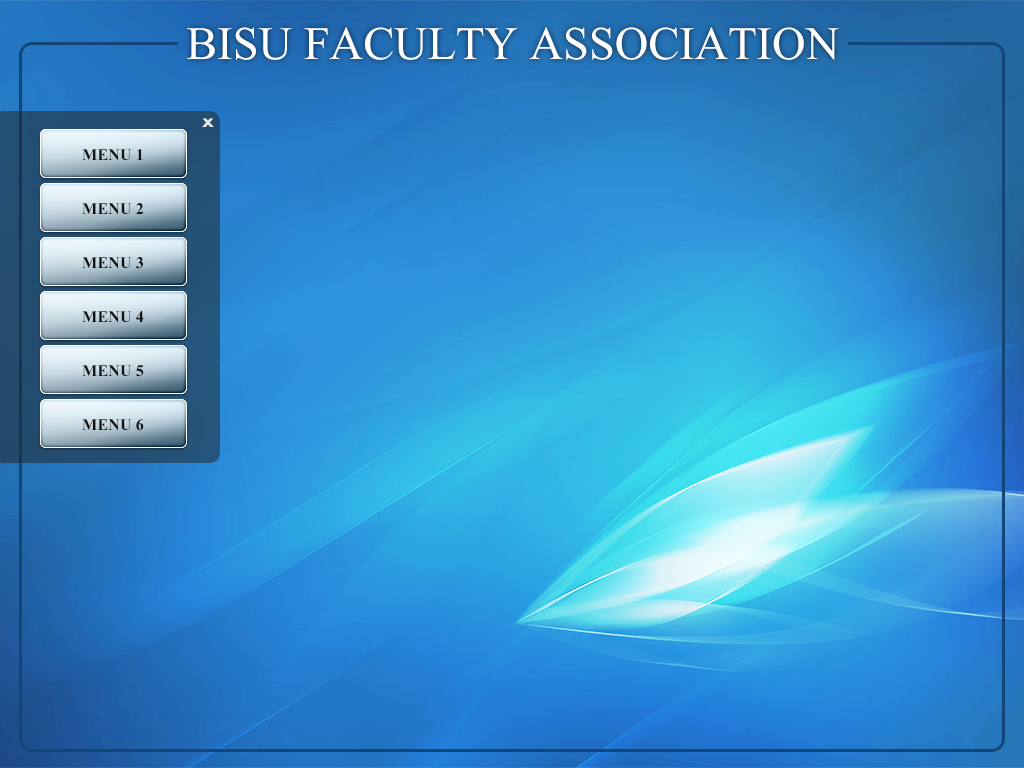
<style>
.page{position:relative;width:1024px;height:768px}
.page>*{position:absolute;margin:0}
.t1{font:60px "Kokila";color:#ffffff}
.t2{font:16.2px "Arial-BoldMT";color:#e9e9e9;scale:1.33 1}
.t3{font:21px "Kokila-Bold";color:#121212}
</style>
<div class="page">
<p class="t1" style="left:187px;top:27px;width:652px;height:33px">BISU FACULTY ASSOCIATION</p>
<p class="t2" style="left:202px;top:118px;width:12px;height:9px">x</p>
<p class="t3" style="left:82px;top:149px;width:61px;height:12px">MENU 1</p>
<p class="t3" style="left:82px;top:203px;width:61px;height:12px">MENU 2</p>
<p class="t3" style="left:82px;top:257px;width:61px;height:12px">MENU 3</p>
<p class="t3" style="left:82px;top:311px;width:62px;height:12px">MENU 4</p>
<p class="t3" style="left:82px;top:365px;width:62px;height:12px">MENU 5</p>
<p class="t3" style="left:82px;top:419px;width:62px;height:12px">MENU 6</p>
</div>
